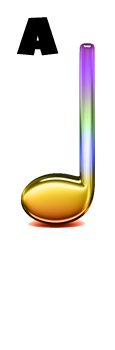
<style>
.page{position:relative;width:115px;height:350px;background:#ffffff}
.page>*{position:absolute;margin:0}
.t1{font:54px "LuckiestGuy-Regular";letter-spacing:0.005em;color:#000000;font-weight:bold;scale:1.11 1}
</style>
<div class="page">
<p class="t1" style="left:17px;top:17px;width:42px;height:39px">A</p>
</div>
